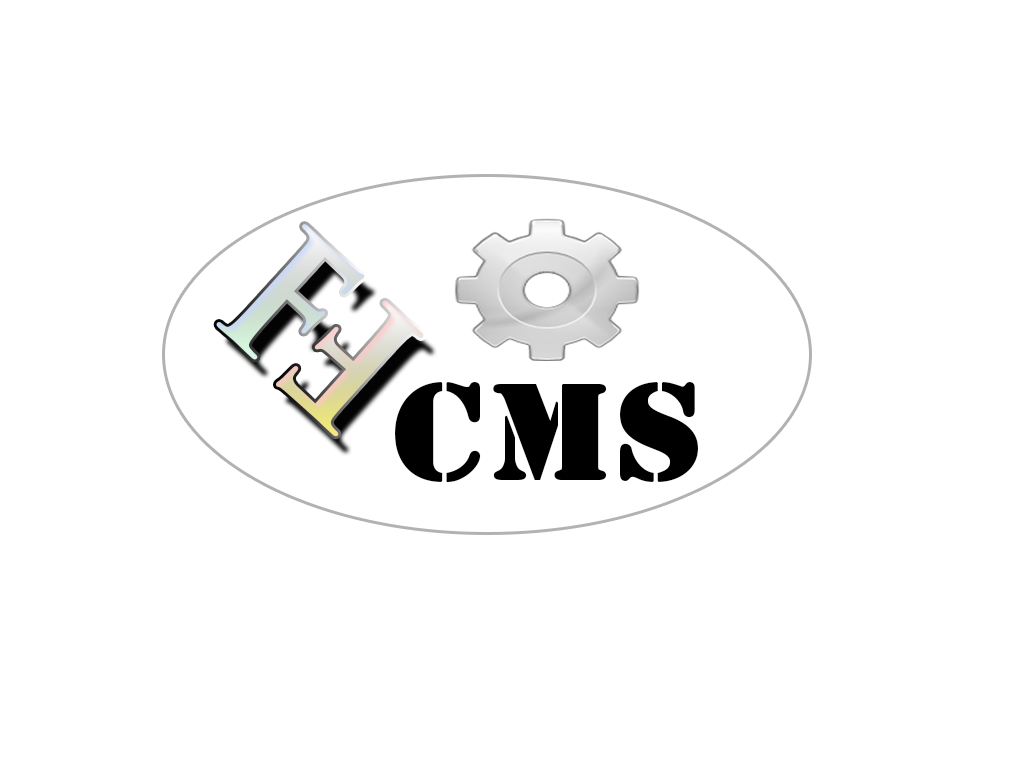
<style>
.page{position:relative;width:1024px;height:768px;background:#ffffff}
.page>*{position:absolute;margin:0}
.t1{font:125px "StencilStd";color:#000000;font-weight:bold;scale:1.12 1}
</style>
<div class="page">
<p class="t1" style="left:395px;top:382px;width:303px;height:100px">CMS</p>
</div>
